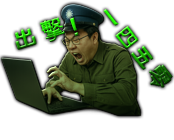
<style>
.page{position:relative;width:174px;height:140px;background:#ffffff}
.page>*{position:absolute;margin:0}
.t1{font:29.1px "FZZJ-MSHLFW"}
.t2{font:25.6px "FZZJ-MSHLFW"}
</style>
<div class="page">
<p class="t1" style="left:15px;top:17px;width:64px;height:33px;rotate:-17deg">出击！</p>
<p class="t2" style="left:103px;top:9px;width:70px;height:79px;rotate:52deg">一四五零</p>
</div>
